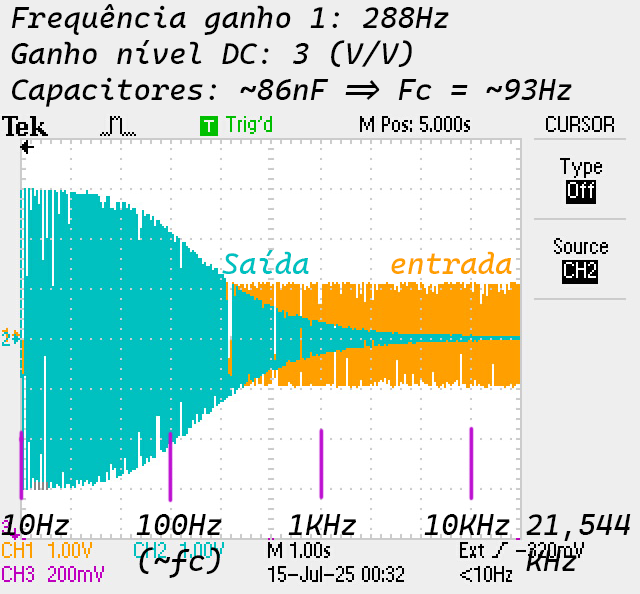
<style>
.page{position:relative;width:640px;height:594px;background:#eeeeee}
.page>*{position:absolute;margin:0}
.t1{font:30px "CascadiaCode-Italic";color:#000000}
.t2{font:30px "CascadiaCode-Italic";color:#00c1c0}
.t3{font:30px "CascadiaCode-Italic";color:#ff9f01}
</style>
<div class="page">
<p class="t1" style="left:11px;top:4px;width:561px;height:103px">Frequência ganho 1: 288Hz<br>Ganho nível DC: 3 (V/V)<br>Capacitores: ~86nF =&gt; Fc = ~93Hz</p>
<p class="t2" style="left:222px;top:250px;width:87px;height:24px">Saída</p>
<p class="t3" style="left:391px;top:251px;width:121px;height:23px">entrada</p>
<p class="t1" style="left:1px;top:514px;width:68px;height:21px">10Hz</p>
<p class="t1" style="left:136px;top:514px;width:86px;height:64px">100Hz<br>(~fc)</p>
<p class="t1" style="left:288px;top:514px;width:68px;height:21px">1KHz</p>
<p class="t1" style="left:424px;top:514px;width:86px;height:21px">10KHz</p>
<p class="t1" style="left:526px;top:514px;width:105px;height:57px">21,544<br>KHz</p>
</div>
